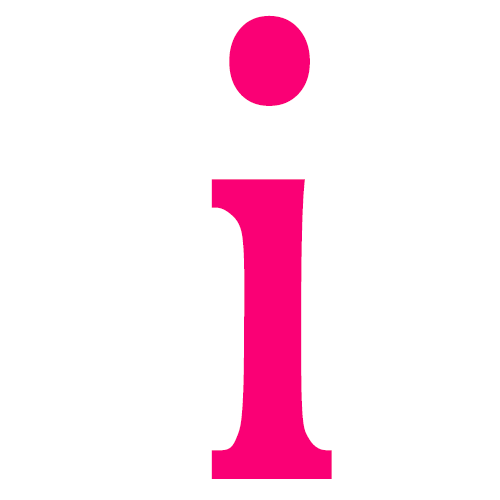
<style>
.page{position:relative;width:500px;height:500px;background:#ffffff}
.page>*{position:absolute;margin:0}
.t1{font:624.1px "Euphorigenic-Regular";color:#fa0075}
</style>
<div class="page">
<p class="t1" style="left:211px;top:15px;width:121px;height:464px">i</p>
</div>
